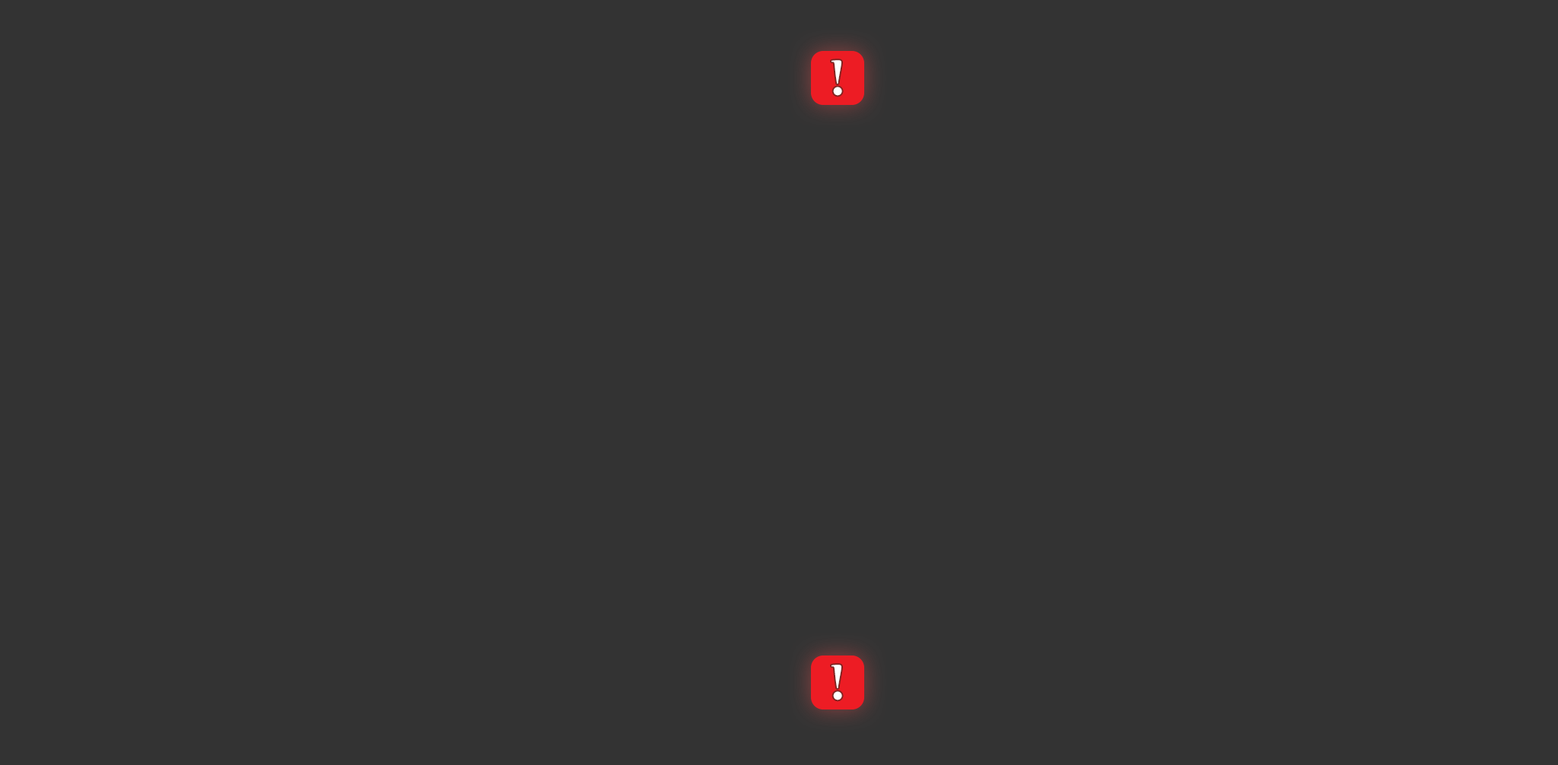
<style>
.page{position:relative;width:1558px;height:765px;background:#333333}
.page>*{position:absolute;margin:0}
.t1{font:54.8px "Perpetua-Bold";color:#ffffff}
</style>
<div class="page">
<p class="t1" style="left:832px;top:60px;width:10px;height:36px">!</p>
<p class="t1" style="left:832px;top:665px;width:10px;height:36px">!</p>
</div>
